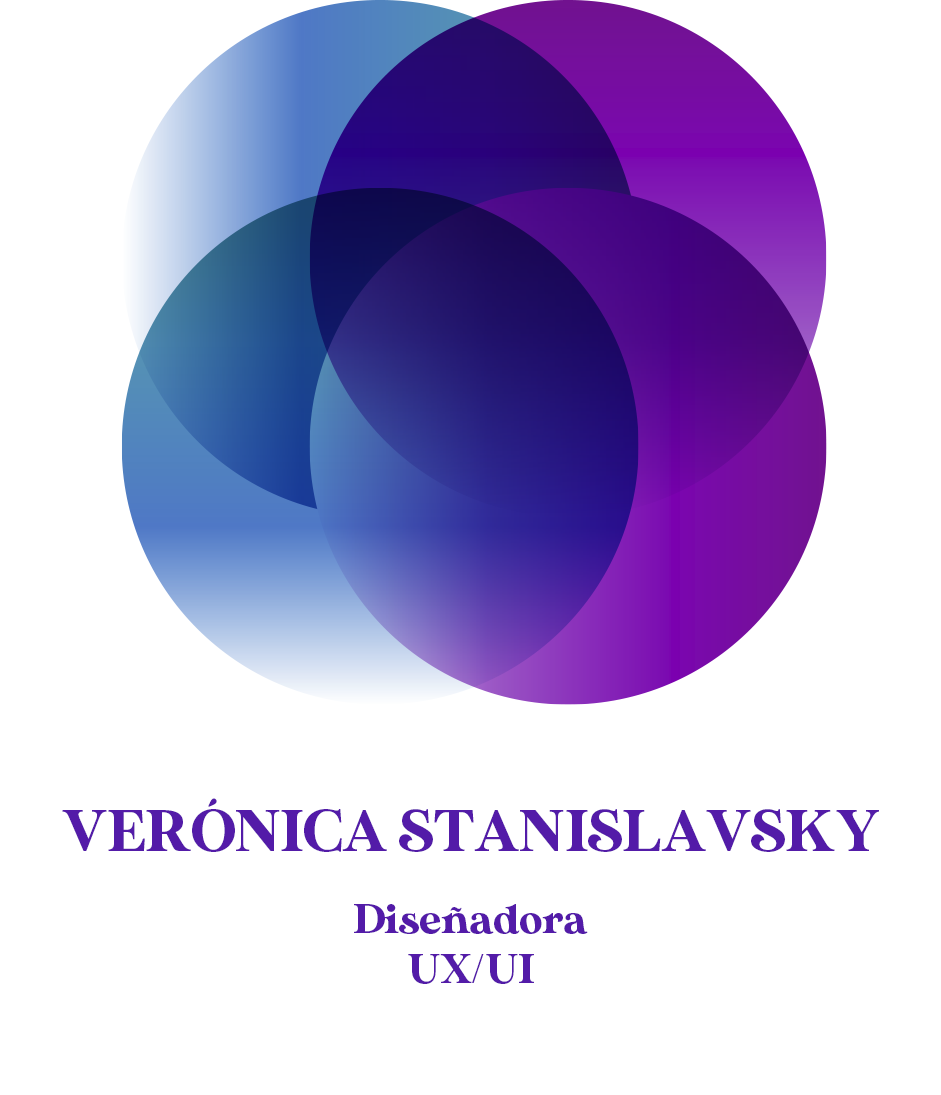
<style>
.page{position:relative;width:941px;height:1095px;background:#ffffff}
.page>*{position:absolute;margin:0}
.t1{font:58.3px "MADESunflower";color:#531ba8}
.t2{font:41.7px "MADESunflower";color:#531ba8}
</style>
<div class="page">
<p class="t1" style="left:62px;top:798px;width:817px;height:54px">VERÓNICA STANISLAVSKY</p>
<p class="t2" style="left:354px;top:904px;width:234px;height:80px;text-align:center">Diseñadora <br>UX/UI</p>
</div>
